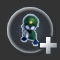
<style>
.page{position:relative;width:60px;height:60px;background:#333333}
.page>*{position:absolute;margin:0}
.t1{font:33.1px "Arial-BoldMT"}
</style>
<div class="page">
<p class="t1" style="left:40px;top:37px;width:17px;height:17px">+</p>
</div>
